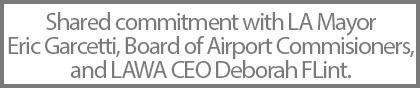
<style>
.page{position:relative;width:420px;height:88px;background:#ffffff}
.page>*{position:absolute;margin:0}
.t1{font:25px/24px "MyriadPro-Regular";letter-spacing:-0.05em;color:#7a7a7a}
</style>
<div class="page">
<p class="t1" style="left:8px;top:12px;width:406px;height:66px;text-align:center">Shared commitment with LA Mayor<br>Eric Garcetti, Board of Airport Commisioners,<br>and LAWA CEO Deborah FLint.</p>
</div>
